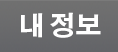
<style>
.page{position:relative;width:118px;height:52px}
.page>*{position:absolute;margin:0}
.t1{font:26px "AdobeGothicStd-Bold";color:#ffffff}
</style>
<div class="page">
<p class="t1" style="left:21px;top:12px;width:80px;height:26px">내 정보</p>
</div>
